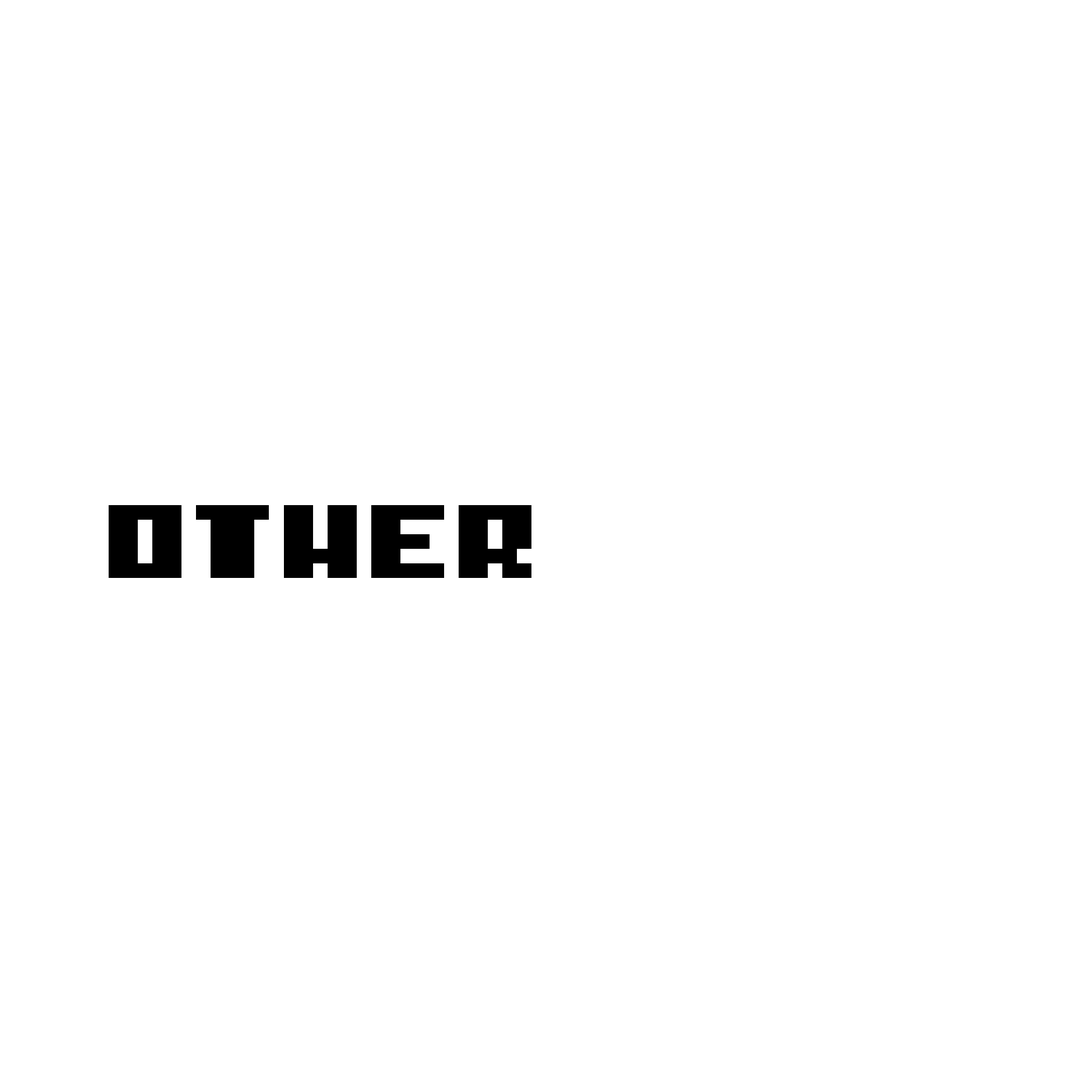
<style>
.page{position:relative;width:1092px;height:1092px;background:#ffffff}
.page>*{position:absolute;margin:0}
.t1{font:116.7px "I-pixel-u";color:#000000}
.t2{font:116.7px "I-pixel-u";color:#ffffff}
</style>
<div class="page">
<p class="t1" style="left:109px;top:505px;width:919px;height:73px">OTHER<span class="t2"> PIXEL</span></p>
</div>
